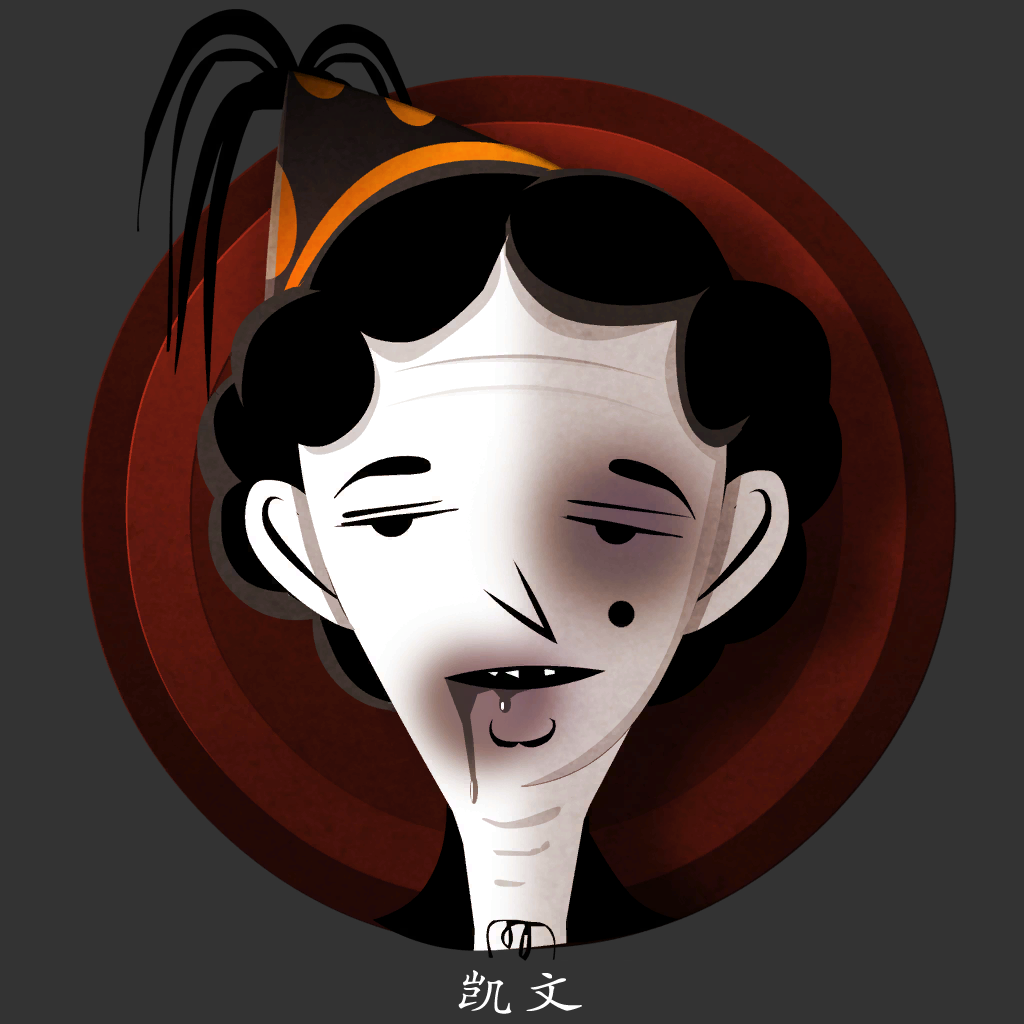
<style>
.page{position:relative;width:1024px;height:1024px;background:#333333}
.page>*{position:absolute;margin:0}
.t1{font:53.3px "STKaiti";letter-spacing:0.1em;color:#ffffff}
</style>
<div class="page">
<p class="t1" style="left:458px;top:970px;width:124px;height:44px">凯文</p>
</div>
